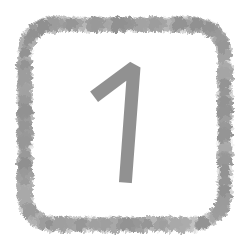
<style>
.page{position:relative;width:250px;height:250px;background:#ffffff}
.page>*{position:absolute;margin:0}
.t1{font:160px "HappyZcool-2016";letter-spacing:0.2em;color:#919191}
</style>
<div class="page">
<p class="t1" style="left:90px;top:61px;width:51px;height:123px">1</p>
</div>
